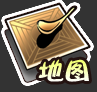
<style>
.page{position:relative;width:97px;height:92px;background:#333333}
.page>*{position:absolute;margin:0}
.t1{font:26px "DFPBuDingW12"}
</style>
<div class="page">
<p class="t1" style="left:38px;top:59px;width:51px;height:23px">地图</p>
</div>
